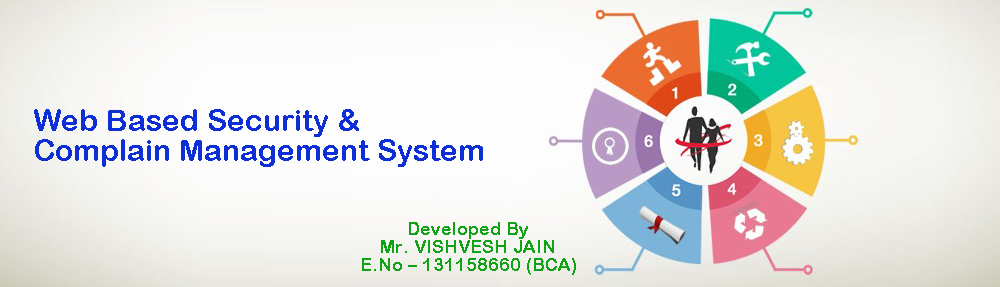
<style>
.page{position:relative;width:1000px;height:287px}
.page>*{position:absolute;margin:0}
.t1{font:30px/30px "ArialRoundedMTBold";color:#0e2fd5}
.t2{font:18px/18px "ArialRoundedMTBold";color:#12a215}
</style>
<div class="page">
<p class="t1" style="left:34px;top:109px;width:449px;height:58px">Web Based Security &amp; <br>Complain Management System</p>
<p class="t2" style="left:362px;top:222px;width:214px;height:53px;text-align:center">Developed By<br>Mr. VISHVESH JAIN<br>E.No – 131158660 (BCA)</p>
</div>
